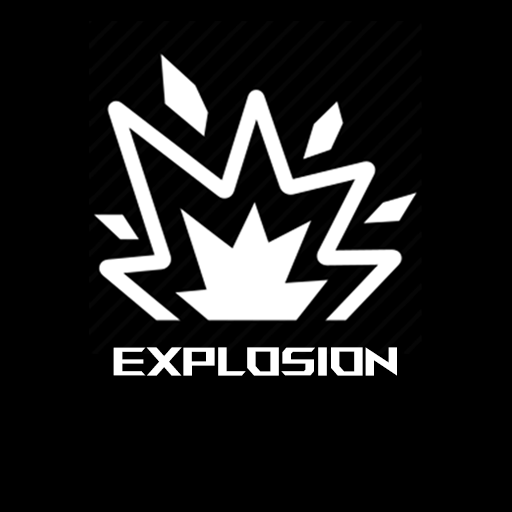
<style>
.page{position:relative;width:512px;height:512px;background:#000000}
.page>*{position:absolute;margin:0}
.t1{font:40px "ROGFonts-Regular";color:#ffffff}
</style>
<div class="page">
<p class="t1" style="left:113px;top:347px;width:284px;height:29px">EXPLOSION</p>
</div>
